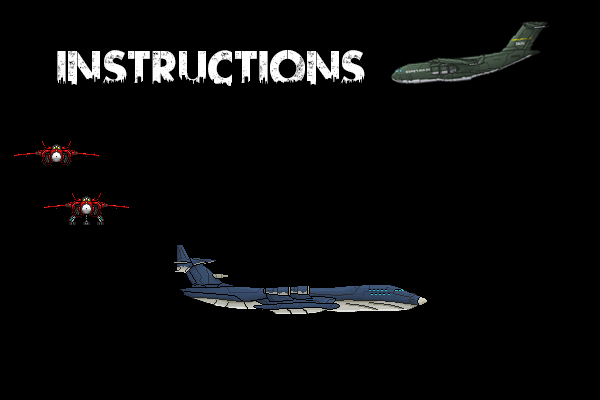
<style>
.page{position:relative;width:600px;height:400px;background:#000000}
.page>*{position:absolute;margin:0}
.t1{font:45px "UrbanJungleDEMO";letter-spacing:0.04em;color:#ffffff}
</style>
<div class="page">
<p class="t1" style="left:57px;top:50px;width:308px;height:36px">Instructions</p>
</div>
